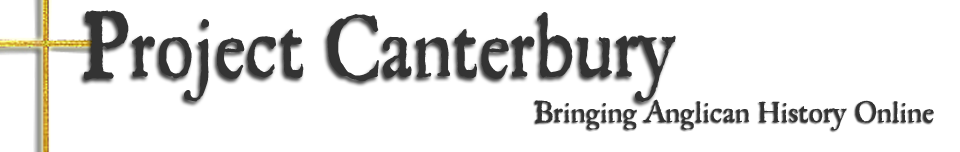
<style>
.page{position:relative;width:960px;height:152px;background:#ffffff}
.page>*{position:absolute;margin:0}
.t1{font:87.5px "RegulaOldFace";color:#333333;scale:0.88 1}
.t2{font:29.2px "RegulaOldFace";color:#333333}
</style>
<div class="page">
<p class="t1" style="left:83px;top:10px;width:593px;height:92px">Project Canterbury</p>
<p class="t2" style="left:534px;top:99px;width:400px;height:32px">Bringing Anglican History Online</p>
</div>
